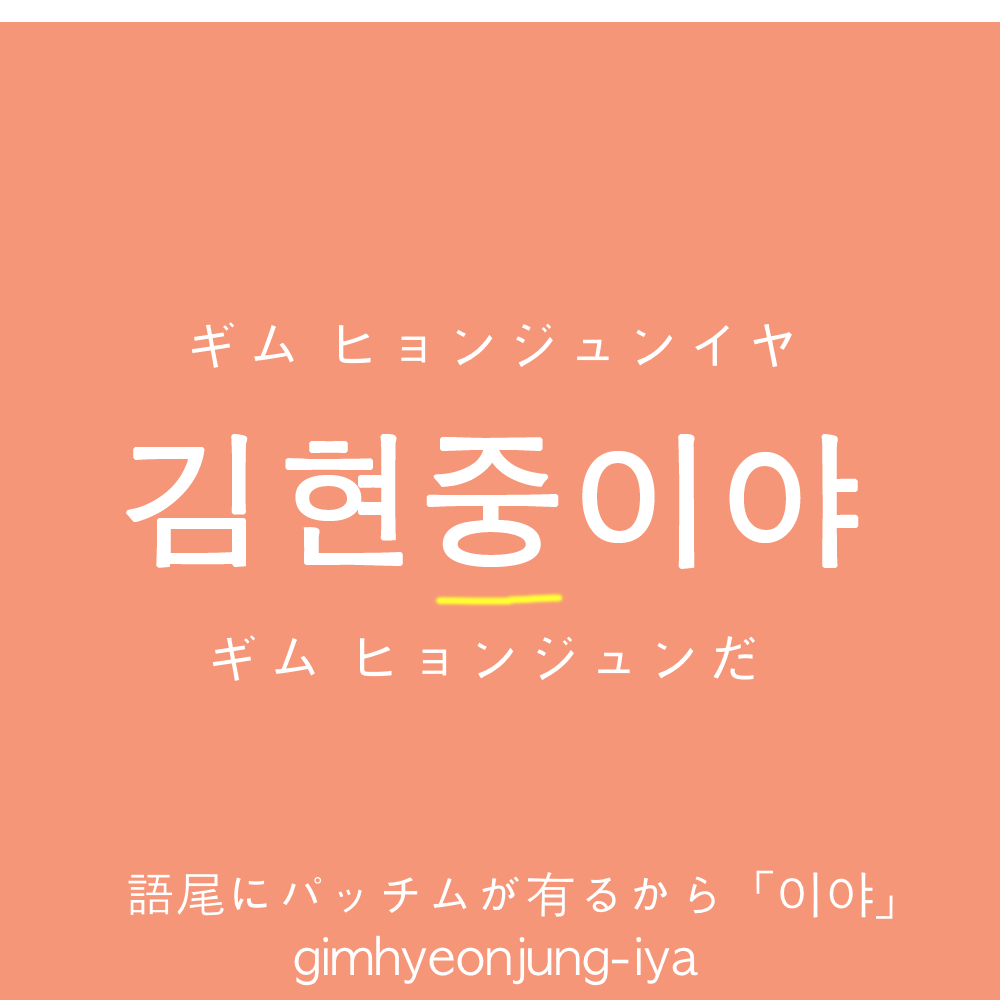
<style>
.page{position:relative;width:1000px;height:1000px;background:#f69679}
.page>*{position:absolute;margin:0}
.t1{font:60px "AppleGothic";color:#ffffff}
.t2{font:145px "AppleGothic";color:#ffffff;font-weight:bold}
.t3{font:50px "AppleGothic";color:#ffffff}
</style>
<div class="page">
<p class="t1" style="left:191px;top:322px;width:601px;height:46px">ギム ヒョンジュンイヤ</p>
<p class="t2" style="left:126px;top:434px;width:733px;height:135px">김현중이야</p>
<p class="t1" style="left:212px;top:635px;width:543px;height:46px">ギム ヒョンジュンだ</p>
<p class="t3" style="left:128px;top:870px;width:765px;height:49px">語尾にパッチムが有るから「이야」</p>
<p class="t3" style="left:294px;top:935px;width:404px;height:51px">gimhyeonjung-iya</p>
</div>
